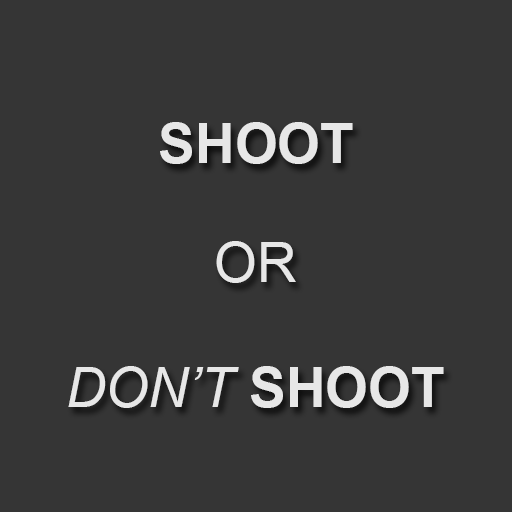
<style>
.page{position:relative;width:512px;height:512px;background:#353535}
.page>*{position:absolute;margin:0}
.t1{font:55px "Arial-BoldMT";color:#e7e7e7}
.t2{font:55px "ArialMT";color:#e7e7e7}
.t3{font:55px "Arial-ItalicMT";color:#e7e7e7}
</style>
<div class="page">
<p class="t1" style="left:160px;top:122px;width:193px;height:42px">SHOOT</p>
<p class="t2" style="left:216px;top:241px;width:80px;height:42px">OR</p>
<p class="t3" style="left:68px;top:366px;width:376px;height:42px">DON’T <span class="t1">SHOOT</span></p>
</div>
